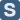
<style>
.page{position:relative;width:20px;height:20px;background:#3d5f7f}
.page>*{position:absolute;margin:0}
.t1{font:24px "HelveticaNeue";color:#e5ebf0;font-weight:bold}
</style>
<div class="page">
<p class="t1" style="left:4px;top:3px;width:12px;height:14px">s</p>
</div>
